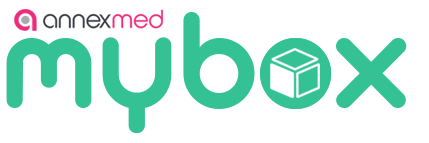
<style>
.page{position:relative;width:429px;height:143px;background:#ffffff}
.page>*{position:absolute;margin:0}
.t1{font:148.8px "AristaProAlternate-DemiBold";color:#34c295}
</style>
<div class="page">
<p class="t1" style="left:6px;top:12px;width:401px;height:122px">mybox</p>
</div>
